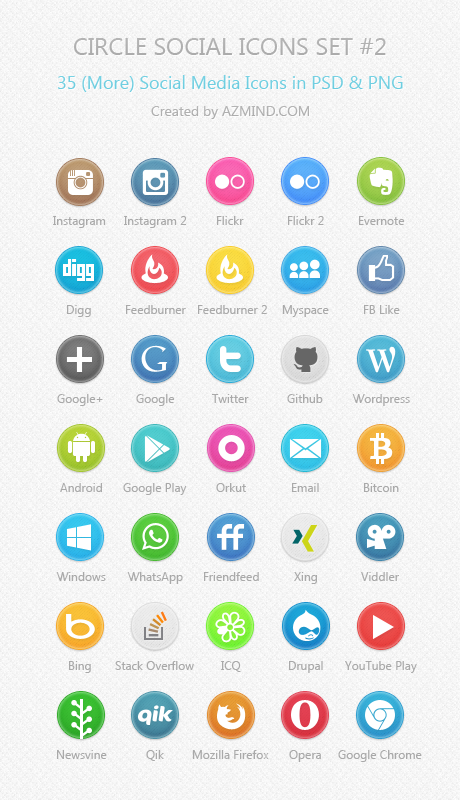
<style>
.page{position:relative;width:460px;height:800px}
.page>*{position:absolute;margin:0}
.t1{font:24px "SegoeUI";color:#aaaaaa}
.t2{font:18px "SegoeUI";color:#64cbdf}
.t3{font:14px "SegoeUI";color:#aaaaaa}
.t4{font:12px "SegoeUI";color:#aaaaaa}
</style>
<div class="page">
<p class="t1" style="left:74px;top:38px;width:312px;height:17px">CIRCLE SOCIAL ICONS SET #2</p>
<p class="t2" style="left:58px;top:75px;width:345px;height:17px">35 (More) Social Media Icons in PSD &amp; PNG</p>
<p class="t3" style="left:151px;top:106px;width:158px;height:13px">Created by AZMIND.COM</p>
<p class="t4" style="left:53px;top:216px;width:53px;height:12px">Instagram</p>
<p class="t4" style="left:124px;top:216px;width:63px;height:12px">Instagram 2</p>
<p class="t4" style="left:217px;top:216px;width:27px;height:9px">Flickr</p>
<p class="t4" style="left:288px;top:216px;width:36px;height:9px">Flickr 2</p>
<p class="t4" style="left:359px;top:216px;width:46px;height:9px">Evernote</p>
<p class="t4" style="left:67px;top:305px;width:24px;height:12px">Digg</p>
<p class="t4" style="left:126px;top:305px;width:60px;height:9px">Feedburner</p>
<p class="t4" style="left:198px;top:305px;width:69px;height:9px">Feedburner 2</p>
<p class="t4" style="left:282px;top:305px;width:47px;height:12px">Myspace</p>
<p class="t4" style="left:364px;top:305px;width:36px;height:9px">FB Like</p>
<p class="t4" style="left:57px;top:394px;width:46px;height:12px">Google+</p>
<p class="t4" style="left:136px;top:394px;width:39px;height:12px">Google</p>
<p class="t4" style="left:212px;top:394px;width:37px;height:9px">Twitter</p>
<p class="t4" style="left:287px;top:394px;width:36px;height:9px">Github</p>
<p class="t4" style="left:352px;top:394px;width:58px;height:12px">Wordpress</p>
<p class="t4" style="left:60px;top:483px;width:42px;height:9px">Android</p>
<p class="t4" style="left:123px;top:483px;width:64px;height:12px">Google Play</p>
<p class="t4" style="left:216px;top:483px;width:30px;height:9px">Orkut</p>
<p class="t4" style="left:292px;top:483px;width:27px;height:9px">Email</p>
<p class="t4" style="left:364px;top:483px;width:35px;height:9px">Bitcoin</p>
<p class="t4" style="left:56px;top:572px;width:50px;height:9px">Windows</p>
<p class="t4" style="left:127px;top:572px;width:56px;height:12px">WhatsApp</p>
<p class="t4" style="left:204px;top:572px;width:55px;height:9px">Friendfeed</p>
<p class="t4" style="left:294px;top:572px;width:23px;height:12px">Xing</p>
<p class="t4" style="left:361px;top:572px;width:38px;height:9px">Viddler</p>
<p class="t4" style="left:69px;top:661px;width:22px;height:12px">Bing</p>
<p class="t4" style="left:115px;top:661px;width:79px;height:9px">Stack Overflow</p>
<p class="t4" style="left:221px;top:661px;width:20px;height:11px">ICQ</p>
<p class="t4" style="left:289px;top:661px;width:34px;height:12px">Drupal</p>
<p class="t4" style="left:345px;top:661px;width:72px;height:12px">YouTube Play</p>
<p class="t4" style="left:57px;top:750px;width:50px;height:9px">Newsvine</p>
<p class="t4" style="left:146px;top:750px;width:18px;height:11px">Qik</p>
<p class="t4" style="left:192px;top:750px;width:77px;height:9px">Mozilla Firefox</p>
<p class="t4" style="left:289px;top:750px;width:32px;height:12px">Opera</p>
<p class="t4" style="left:338px;top:750px;width:84px;height:12px">Google Chrome</p>
</div>
